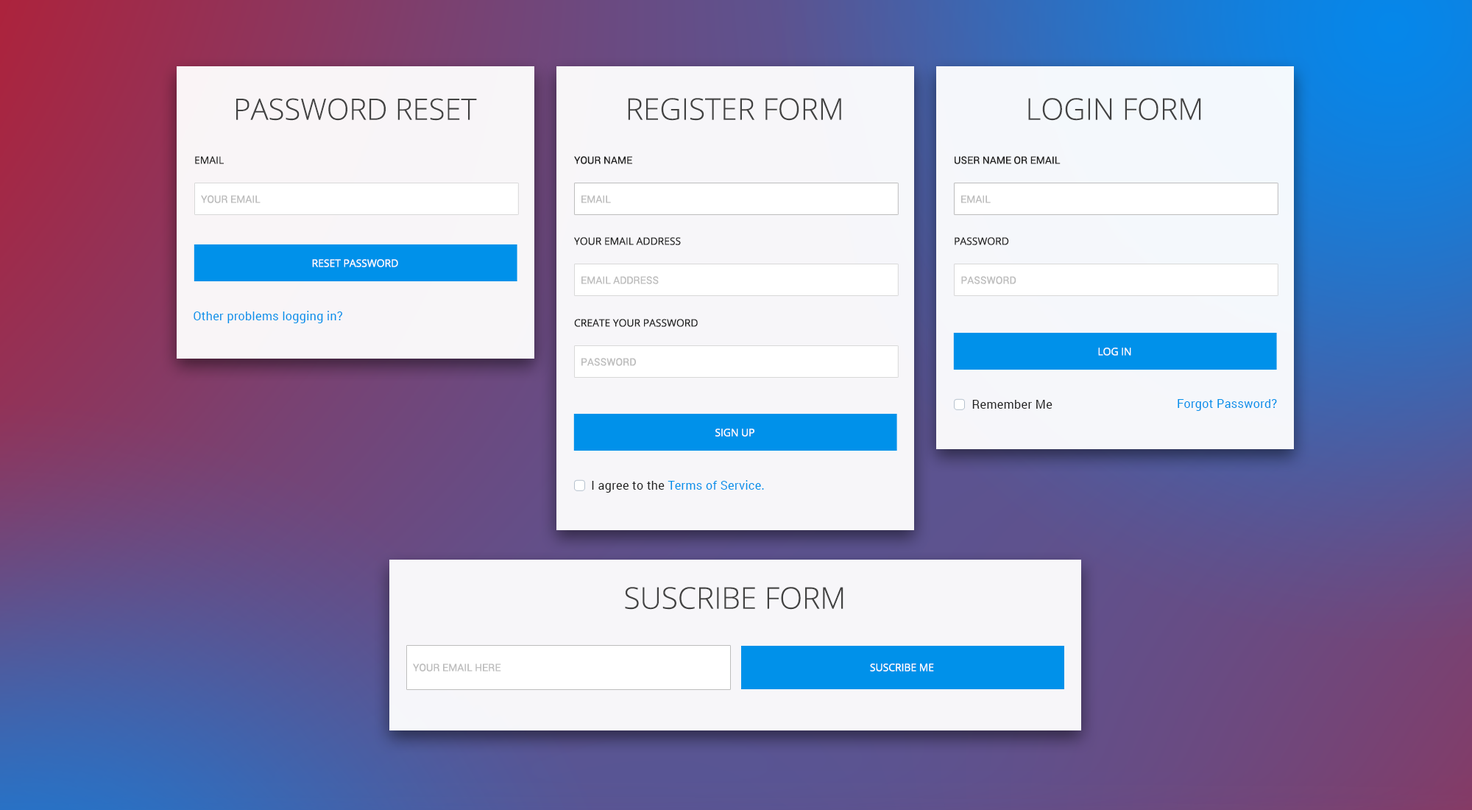
<style>
.page{position:relative;width:1472px;height:810px}
.page>*{position:absolute;margin:0}
.t1{font:29.4px "OpenSans-Light";color:#424242;text-transform:uppercase}
.t2{font:29.9px "OpenSans-Light";color:#424242;text-transform:uppercase}
.t3{font:10.3px "OpenSans";letter-spacing:-0.005em;color:#212121;text-transform:uppercase}
.t4{font:10.3px "Roboto-Regular";letter-spacing:-0.005em;color:#212121;text-transform:uppercase}
.t5{font:10.3px "Roboto-Regular";letter-spacing:-0.005em;color:#bdbdbd;text-transform:uppercase}
.t6{font:10.3px "OpenSans";letter-spacing:-0.005em;color:#ffffff;text-transform:uppercase}
.t7{font:11.8px "Roboto-Regular";letter-spacing:0.025em;color:#0091ea}
.t8{font:11.8px "Roboto-Regular";letter-spacing:0.025em;color:#212121}
</style>
<div class="page">
<p class="t1" style="left:236px;top:98px;width:241px;height:23px">password reset</p>
<p class="t2" style="left:628px;top:98px;width:213px;height:23px">Register form</p>
<p class="t2" style="left:1028px;top:98px;width:174px;height:23px">Login form</p>
<p class="t3" style="left:195px;top:156px;width:29px;height:8px">email</p>
<p class="t4" style="left:574px;top:156px;width:58px;height:8px">your name</p>
<p class="t4" style="left:955px;top:156px;width:106px;height:8px">User name or email</p>
<p class="t5" style="left:201px;top:195px;width:60px;height:8px">your email</p>
<p class="t5" style="left:582px;top:195px;width:29px;height:8px">email</p>
<p class="t5" style="left:961px;top:195px;width:30px;height:8px">email</p>
<p class="t3" style="left:574px;top:237px;width:107px;height:8px">Your email address</p>
<p class="t3" style="left:955px;top:237px;width:54px;height:8px">Password</p>
<p class="t6" style="left:312px;top:259px;width:86px;height:8px">reset password</p>
<p class="t5" style="left:582px;top:276px;width:77px;height:8px">email address</p>
<p class="t5" style="left:961px;top:276px;width:56px;height:8px">password</p>
<p class="t7" style="left:194px;top:311px;width:148px;height:12px">Other problems logging in?</p>
<p class="t3" style="left:574px;top:319px;width:124px;height:8px">Create your password</p>
<p class="t6" style="left:1098px;top:347px;width:34px;height:9px">log in</p>
<p class="t5" style="left:582px;top:358px;width:54px;height:8px">password</p>
<p class="t8" style="left:973px;top:400px;width:80px;height:9px">Remember Me</p>
<p class="t7" style="left:1178px;top:399px;width:99px;height:12px">Forgot Password?</p>
<p class="t6" style="left:716px;top:428px;width:39px;height:9px">sign up</p>
<p class="t7" style="left:592px;top:480px;width:172px;height:13px"><span class="t8">I agree to the </span>Terms of Service.</p>
<p class="t2" style="left:625px;top:587px;width:219px;height:23px">suscribe form</p>
<p class="t5" style="left:413px;top:663px;width:88px;height:8px">Your email here</p>
<p class="t6" style="left:870px;top:663px;width:64px;height:8px">suscribe me</p>
</div>
